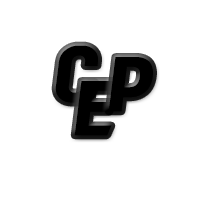
<style>
.page{position:relative;width:200px;height:200px;background:#ffffff}
.page>*{position:absolute;margin:0}
.t1{font:64px "KoreanRKT-R";color:#000000}
</style>
<div class="page">
<p class="t1" style="left:55px;top:45px;width:43px;height:58px">C</p>
<p class="t1" style="left:108px;top:57px;width:45px;height:55px">P</p>
<p class="t1" style="left:74px;top:81px;width:43px;height:55px">E</p>
</div>
